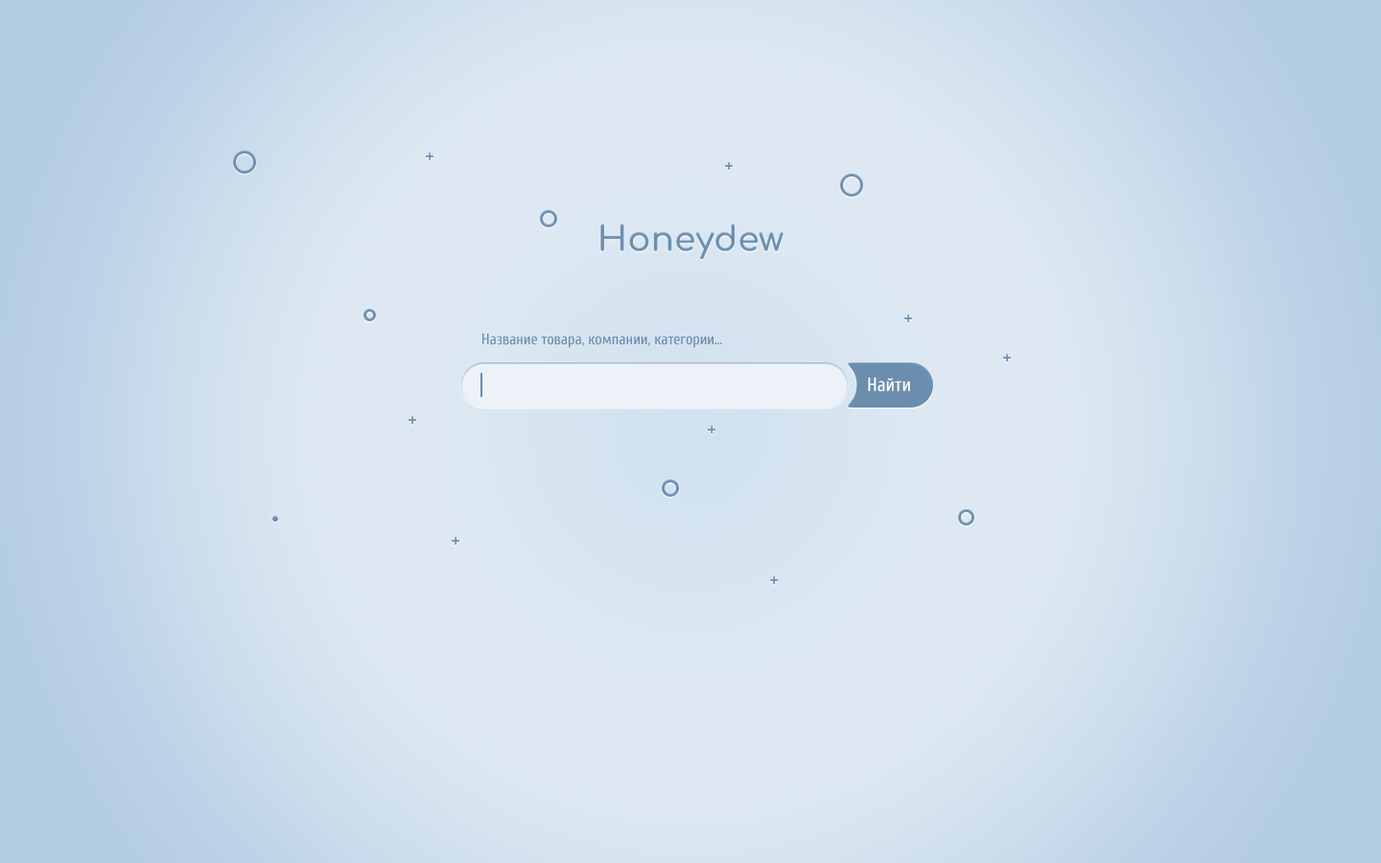
<style>
.page{position:relative;width:1381px;height:863px;background:#dde8f2}
.page>*{position:absolute;margin:0}
.t1{font:34.5px "Comfortaa-Bold";color:#6e90b2}
.t2{font:15.3px "Cuprum-Regular";color:#6b8dae}
.t3{font:19.2px "Cuprum-Regular";color:#ffffff}
</style>
<div class="page">
<p class="t1" style="left:600px;top:223px;width:184px;height:37px">Honeydew</p>
<p class="t2" style="left:482px;top:333px;width:240px;height:15px">Название товара, компании, категории...</p>
<p class="t3" style="left:868px;top:377px;width:42px;height:14px">Найти</p>
</div>
